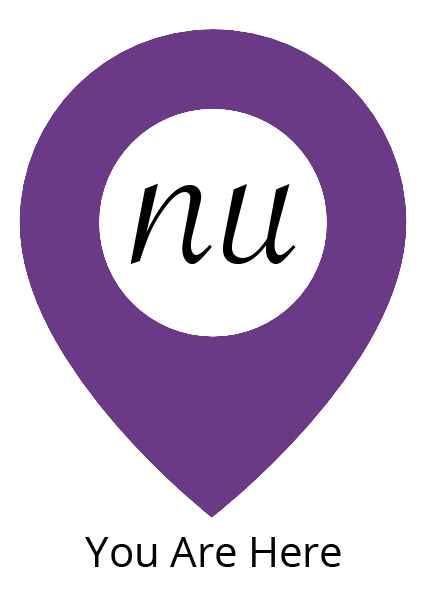
<style>
.page{position:relative;width:421px;height:602px;background:#ffffff}
.page>*{position:absolute;margin:0}
.t1{font:41.7px "OpenSans";color:#000000}
</style>
<div class="page">
<p class="t1" style="left:85px;top:537px;width:256px;height:30px">You Are Here</p>
</div>
